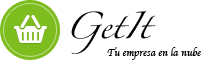
<style>
.page{position:relative;width:212px;height:60px;background:#ffffff}
.page>*{position:absolute;margin:0}
.t1{font:24px "Zapfino";color:#000000}
.t2{font:10px "Apple-Chancery";color:#000000}
</style>
<div class="page">
<p class="t1" style="left:71px;top:11px;width:85px;height:43px">GetIt</p>
<p class="t2" style="left:107px;top:47px;width:94px;height:13px">Tu empresa en la nube</p>
</div>
